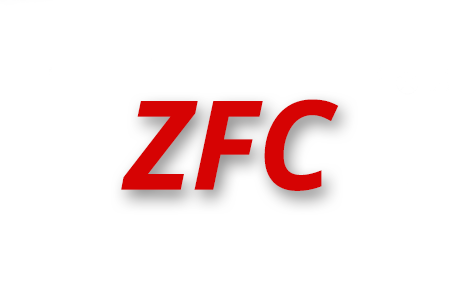
<style>
.page{position:relative;width:460px;height:290px;background:#ffffff}
.page>*{position:absolute;margin:0}
.t1{font:124px "OpenSans-BoldItalic";color:#d60303}
</style>
<div class="page">
<p class="t1" style="left:121px;top:99px;width:218px;height:92px">ZFC</p>
</div>
